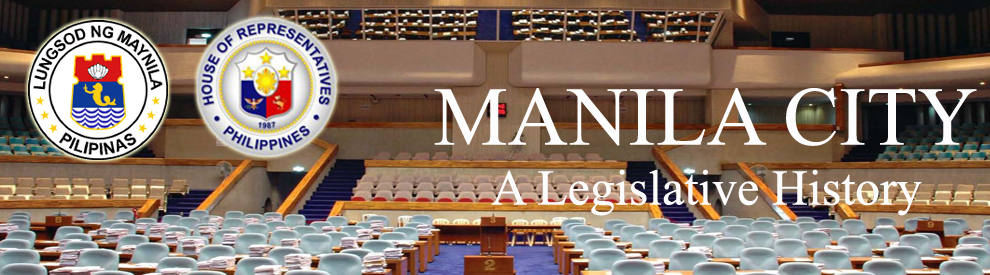
<style>
.page{position:relative;width:990px;height:275px}
.page>*{position:absolute;margin:0}
.t1{font:50px "TimesNewRomanPSMT";color:#fdfcfc}
.t2{font:83.3px "TimesNewRomanPSMT";color:#fdfdfd}
</style>
<div class="page">
<p class="t1" style="left:434px;top:88px;width:543px;height:128px;text-align:center"><span class="t2">MANILA CITY<br></span>A Legislative History</p>
</div>
